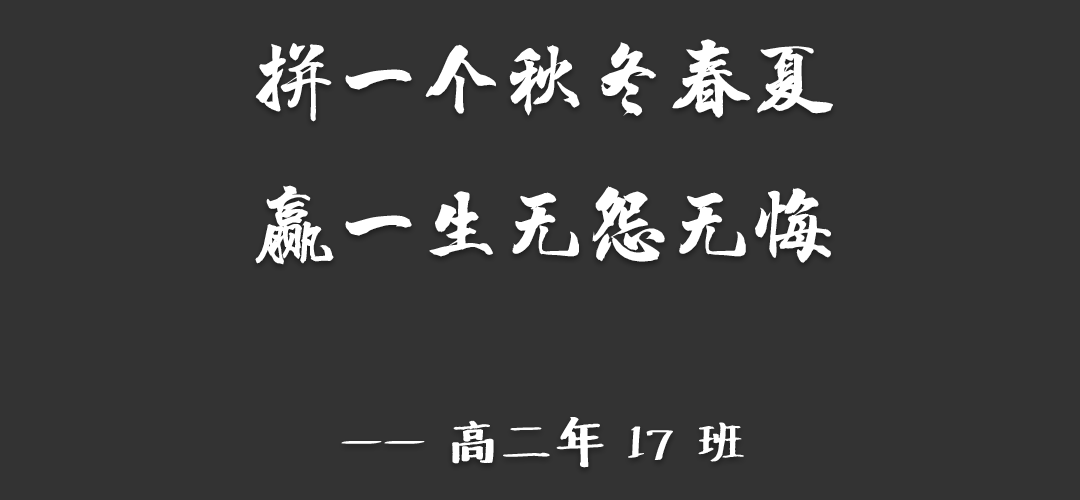
<style>
.page{position:relative;width:1080px;height:500px;background:#333333}
.page>*{position:absolute;margin:0}
.t1{font:83.3px "HYChengXingJ";color:#ffffff}
.t2{font:50px "Undefined";color:#ffffff}
</style>
<div class="page">
<p class="t1" style="left:255px;top:39px;width:578px;height:429px;text-align:center">拼一个秋冬春夏<br>赢一生无怨无悔<br><span class="t2"><br>—— 高二年 17 班</span></p>
</div>
